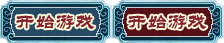
<style>
.page{position:relative;width:224px;height:43px}
.page>*{position:absolute;margin:0}
.t1{font:20px "STLiti";color:#821f2a}
</style>
<div class="page">
<p class="t1" style="left:16px;top:14px;width:79px;height:15px">开始游戏</p>
<p class="t1" style="left:128px;top:14px;width:79px;height:15px">开始游戏</p>
</div>
